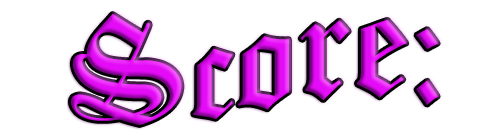
<style>
.page{position:relative;width:500px;height:140px;background:#ffffff}
.page>*{position:absolute;margin:0}
.t1{font:140px "OldEnglishTextMT"}
</style>
<div class="page">
<p class="t1" style="left:71px;top:14px;width:367px;height:111px">Score:</p>
</div>
